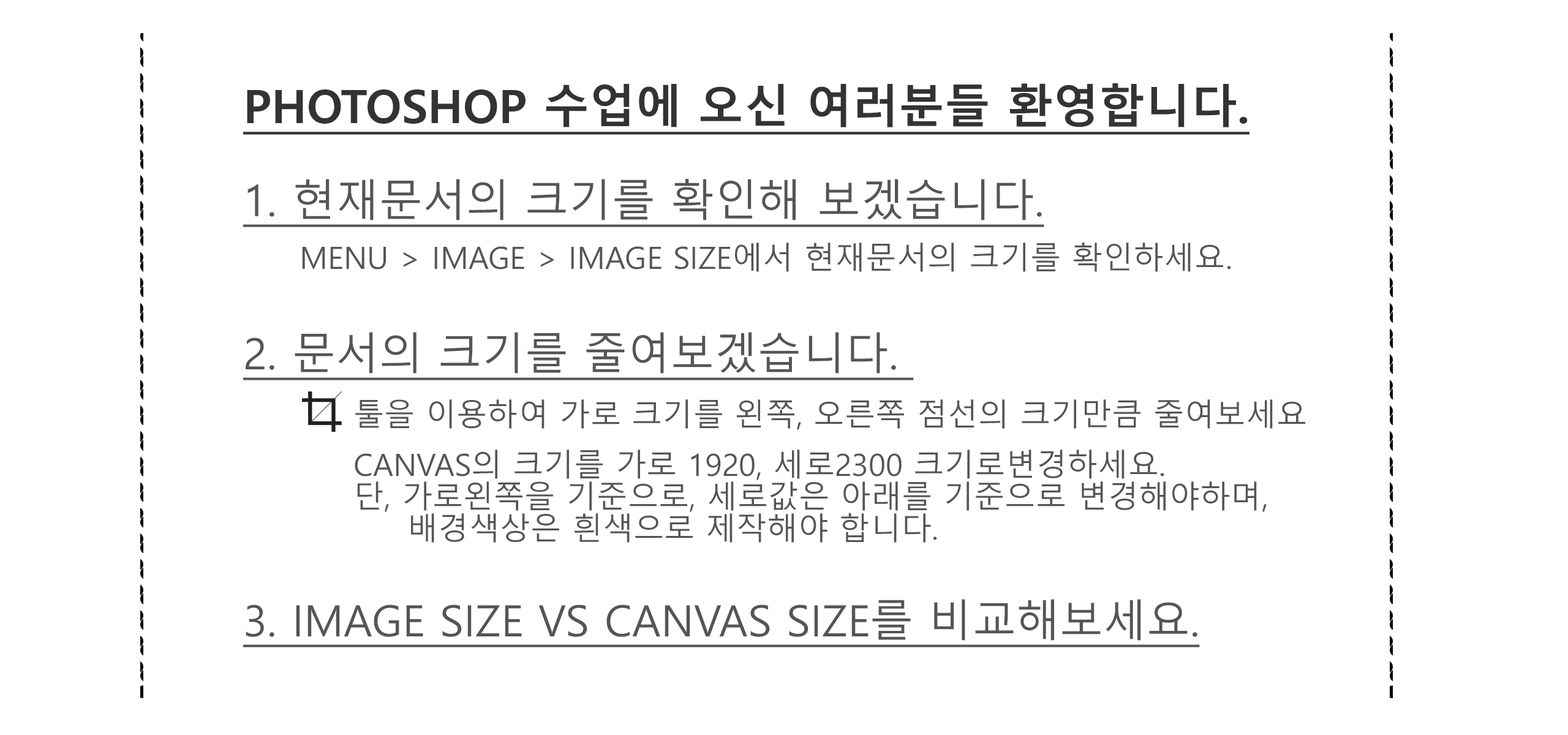
<style>
.page{position:relative;width:1568px;height:735px;background:#ffffff}
.page>*{position:absolute;margin:0}
.t1{font:45.9px "MalgunGothicBold";color:#333333;text-transform:uppercase;text-decoration:underline}
.t2{font:43.4px "MalgunGothic";color:#555555;text-transform:uppercase;text-decoration:underline}
.t3{font:30.6px "MalgunGothic";color:#555555;text-transform:uppercase}
.t4{font:30.6px/31.9px "MalgunGothic";color:#555555;text-transform:uppercase}
</style>
<div class="page">
<p class="t1" style="left:243px;top:83px;width:1007px;height:52px">Photoshop 수업에 오신 여러분들 환영합니다.</p>
<p class="t2" style="left:243px;top:179px;width:801px;height:48px">1. 현재문서의 크기를 확인해 보겠습니다.</p>
<p class="t3" style="left:302px;top:242px;width:929px;height:30px">menu &gt; image &gt; image size에서 현재문서의 크기를 확인하세요.</p>
<p class="t2" style="left:243px;top:332px;width:671px;height:48px">2. 문서의 크기를 줄여보겠습니다.</p>
<p class="t3" style="left:355px;top:399px;width:950px;height:31px">툴을 이용하여 가로 크기를 왼쪽, 오른쪽 점선의 크기만큼 줄여보세요</p>
<p class="t4" style="left:355px;top:450px;width:912px;height:93px">canvas의 크기를 가로 1920, 세로2300 크기로변경하세요.<br>단, 가로왼쪽을 기준으로, 세로값은 아래를 기준으로 변경해야하며,<br>     배경색상은 흰색으로 제작해야 합니다.</p>
<p class="t2" style="left:243px;top:599px;width:957px;height:48px">3. image size vs canvas size를 비교해보세요.</p>
</div>
